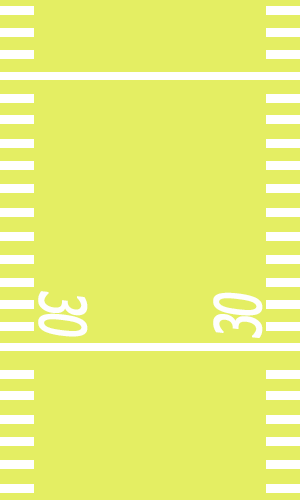
<style>
.page{position:relative;width:300px;height:500px;background:#e4ee63}
.page>*{position:absolute;margin:0}
.t1{font:63.5px "Tahoma";letter-spacing:-0.08em;color:#fefefe;font-weight:bold;font-style:italic;scale:0.68 1}
</style>
<div class="page">
<p class="t1" style="left:38px;top:291px;width:50px;height:46px;rotate:90deg">30</p>
<p class="t1" style="left:213px;top:292px;width:50px;height:46px;rotate:-90deg">30</p>
</div>
